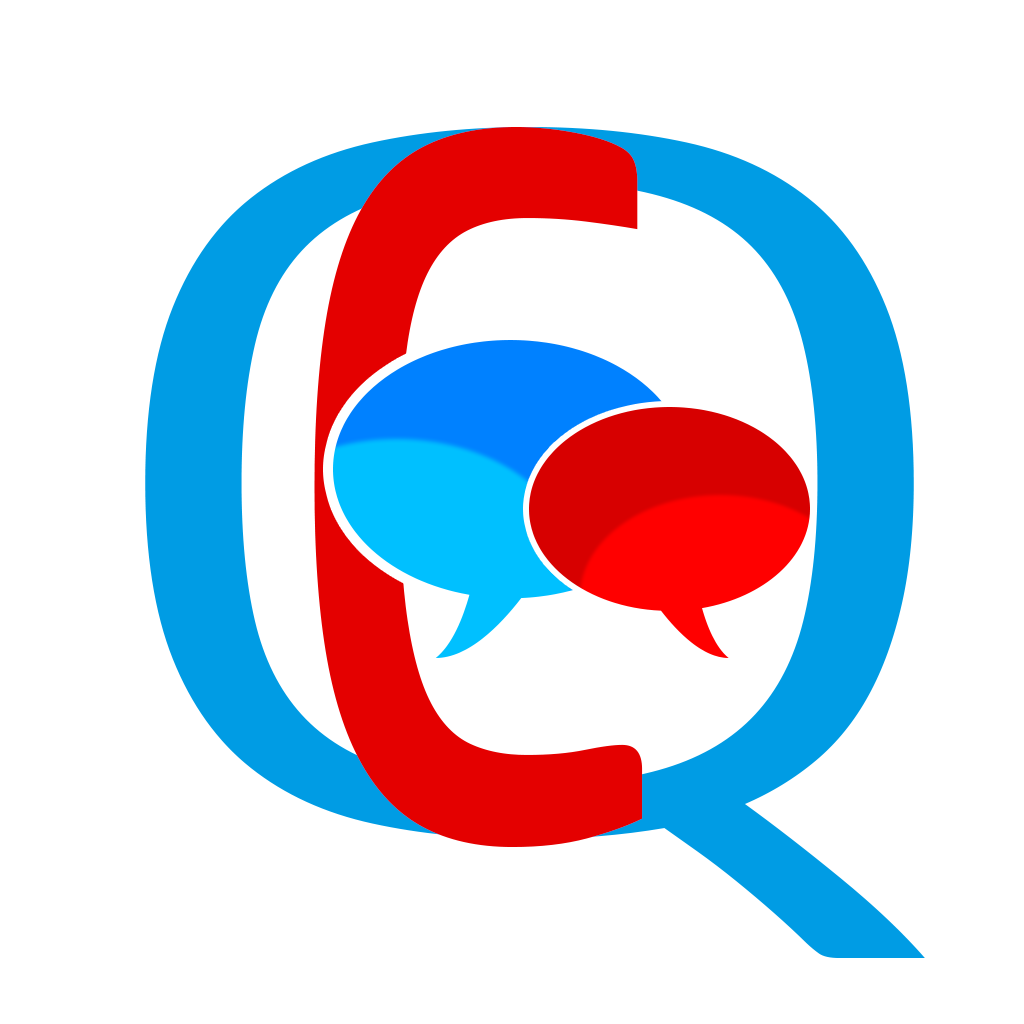
<style>
.page{position:relative;width:1024px;height:1024px;background:#ffffff}
.page>*{position:absolute;margin:0}
.t1{font:999.5px "HPSimplified-Light";color:#009ce4;scale:1.58 1}
.t2{font:1008.1px "HPSimplified-Regular";color:#e40000;scale:0.79 1}
</style>
<div class="page">
<p class="t1" style="left:145px;top:127px;width:780px;height:831px">Q</p>
<p class="t2" style="left:314px;top:127px;width:329px;height:720px">C</p>
</div>
